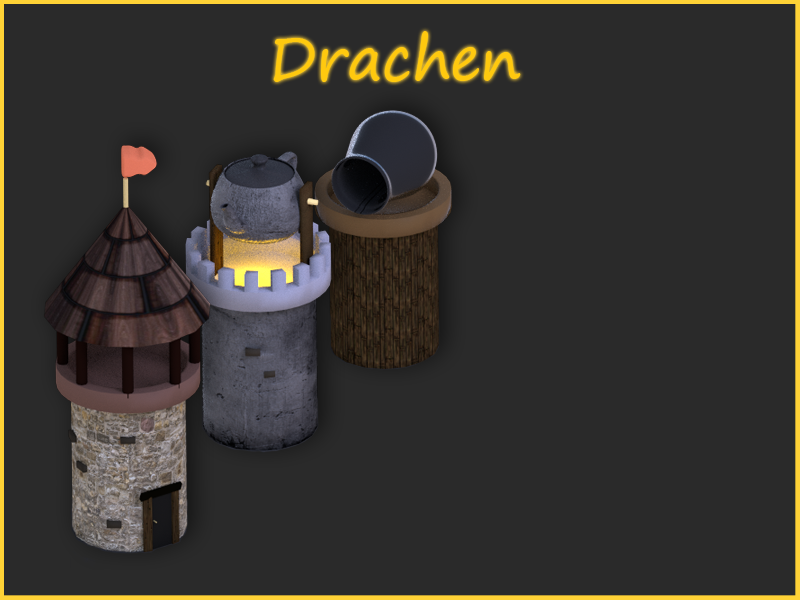
<style>
.page{position:relative;width:800px;height:600px;background:#2a2a2a}
.page>*{position:absolute;margin:0}
.t1{font:60px "SegoePrint";color:#ffc90f}
</style>
<div class="page">
<p class="t1" style="left:273px;top:31px;width:248px;height:51px">Drachen</p>
</div>
